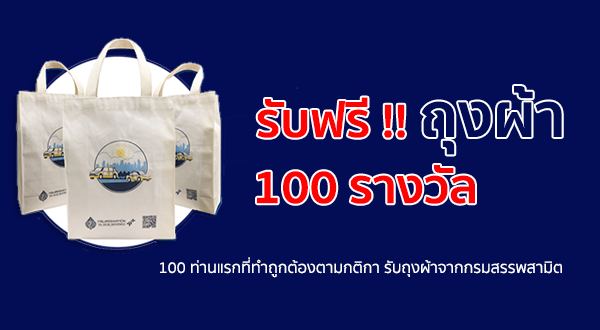
<style>
.page{position:relative;width:600px;height:330px;background:#030d56}
.page>*{position:absolute;margin:0}
.t1{font:48px "SukhumvitSet-Bold";color:#fd0303}
.t2{font:16px "SukhumvitSet-Text";color:#ffffff}
</style>
<div class="page">
<p class="t1" style="left:257px;top:97px;width:148px;height:41px">รับฟรี !!</p>
<p class="t1" style="left:257px;top:165px;width:218px;height:39px">100 รางวัล</p>
<p class="t2" style="left:160px;top:257px;width:402px;height:21px">100 ท่านแรกที่ทำถูกต้องตามกติกา รับถุงผ้าจากกรมสรรพสามิต</p>
</div>
